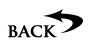
<style>
.page{position:relative;width:92px;height:54px;background:#ffffff}
.page>*{position:absolute;margin:0}
.t1{font:18px "TrajanPro-Bold";color:#000000}
</style>
<div class="page">
<p class="t1" style="left:7px;top:25px;width:50px;height:13px">back</p>
</div>
